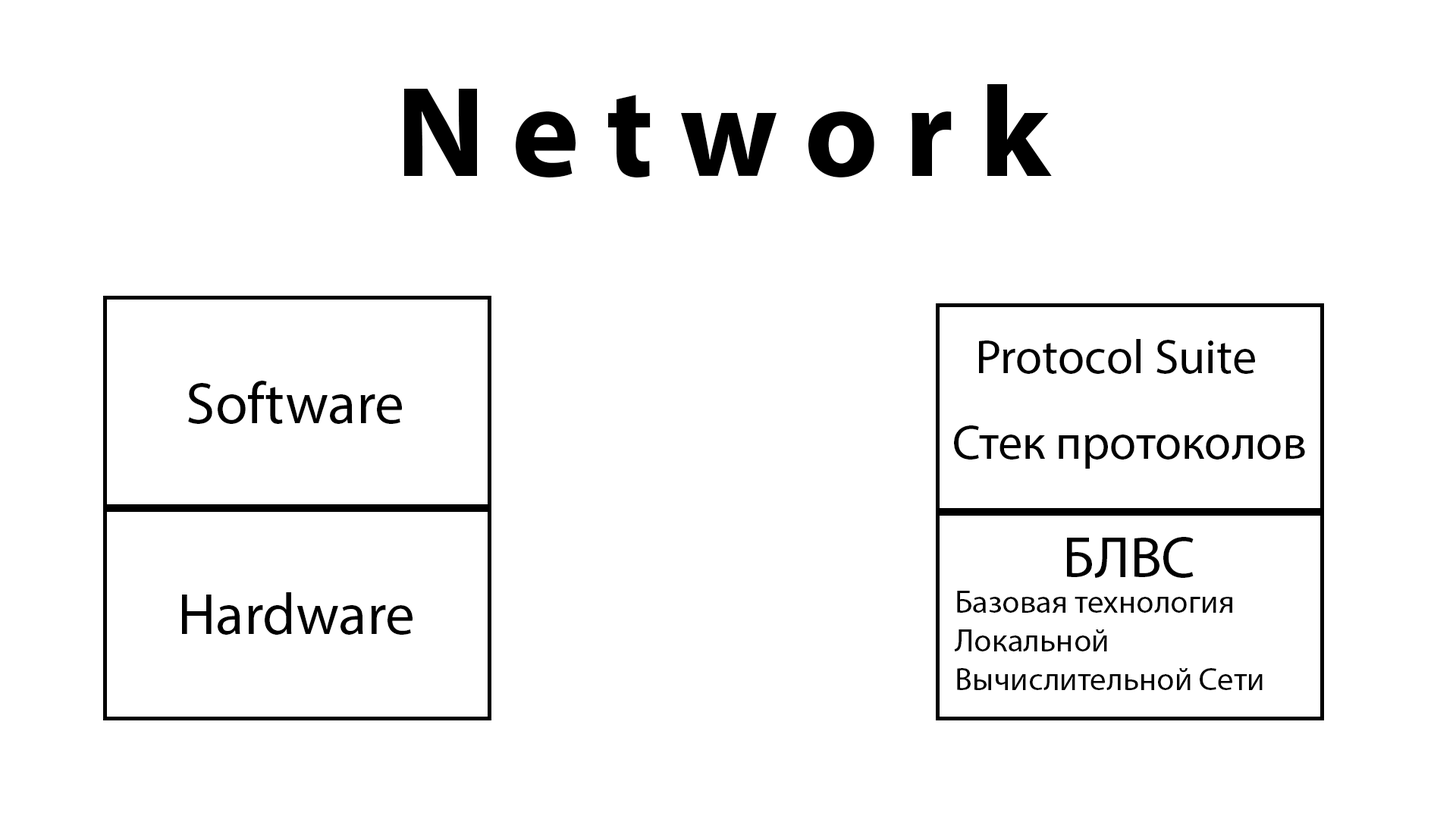
<style>
.page{position:relative;width:1456px;height:819px;background:#ffffff}
.page>*{position:absolute;margin:0}
.t1{font:129.4px "MyriadPro-Bold";color:#000000}
.t2{font:48.5px "MyriadPro-Regular";color:#000000}
.t3{font:58.7px "MyriadPro-Regular";color:#000000}
.t4{font:32.4px "MyriadPro-Regular";color:#000000}
</style>
<div class="page">
<p class="t1" style="left:404px;top:84px;width:648px;height:94px">N e t w o r k</p>
<p class="t2" style="left:979px;top:339px;width:276px;height:35px">Protocol Suite</p>
<p class="t3" style="left:188px;top:381px;width:214px;height:43px">Software</p>
<p class="t2" style="left:954px;top:425px;width:351px;height:44px">Стек протоколов</p>
<p class="t3" style="left:1067px;top:537px;width:127px;height:41px">БЛВС</p>
<p class="t3" style="left:182px;top:592px;width:231px;height:43px">Hardware</p>
<p class="t4" style="left:954px;top:591px;width:309px;height:99px">Базовая технология <br>Локальной <br>Вычислительной Сети</p>
</div>
